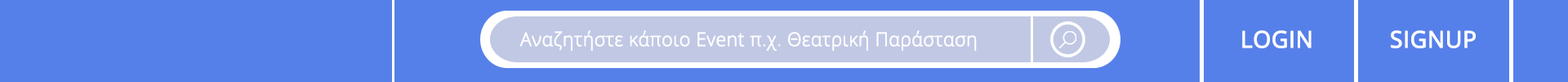
<style>
.page{position:relative;width:1568px;height:82px;background:#5680e9}
.page>*{position:absolute;margin:0}
.t1{font:18.6px "OpenSans-Light";color:#ffffff;font-weight:bold}
.t2{font:22.9px "OpenSans-Regular";color:#ffffff;font-weight:bold}
</style>
<div class="page">
<p class="t1" style="left:519px;top:30px;width:458px;height:21px">Αναζητήστε κάποιο Event π.χ. Θεατρική Παράσταση</p>
<p class="t2" style="left:1242px;top:30px;width:70px;height:18px">LOGIN</p>
<p class="t2" style="left:1391px;top:30px;width:85px;height:18px">SIGNUP</p>
</div>
